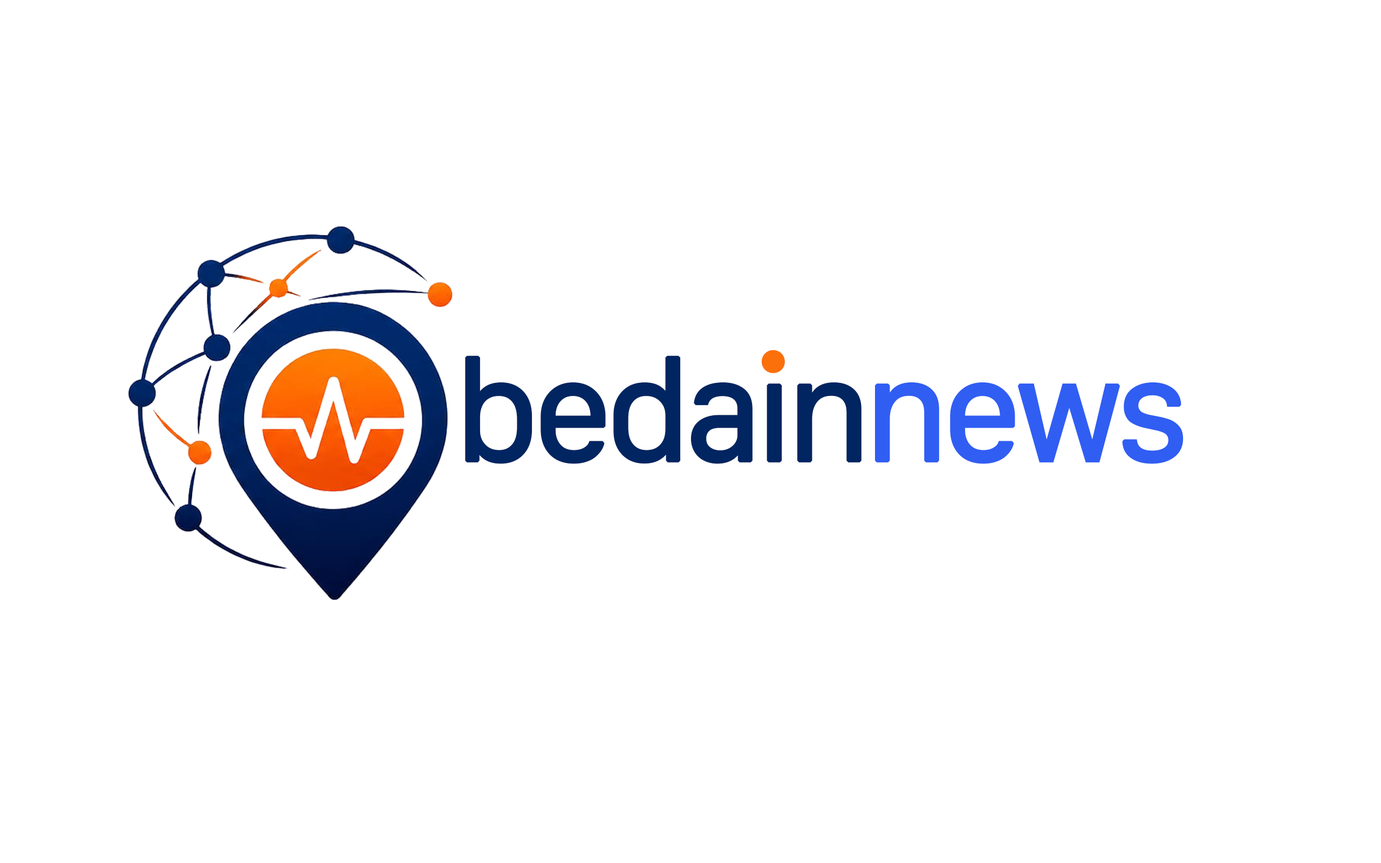
<style>
.page{position:relative;width:1381px;height:863px;background:#ffffff}
.page>*{position:absolute;margin:0}
.t1{font:134.9px "Galvji";letter-spacing:-0.05em;color:#012561;font-weight:bold}
.t2{font:134.9px "Galvji";letter-spacing:-0.05em;color:#305ef3;font-weight:bold}
.t3{font:134.9px "Galvji";letter-spacing:-0.05em;color:#fb700a;font-weight:bold}
</style>
<div class="page">
<p class="t1" style="left:465px;top:351px;width:719px;height:113px">bedain<span class="t2">news</span></p>
<p class="t3" style="left:761px;top:350px;width:24px;height:23px">.</p>
</div>
